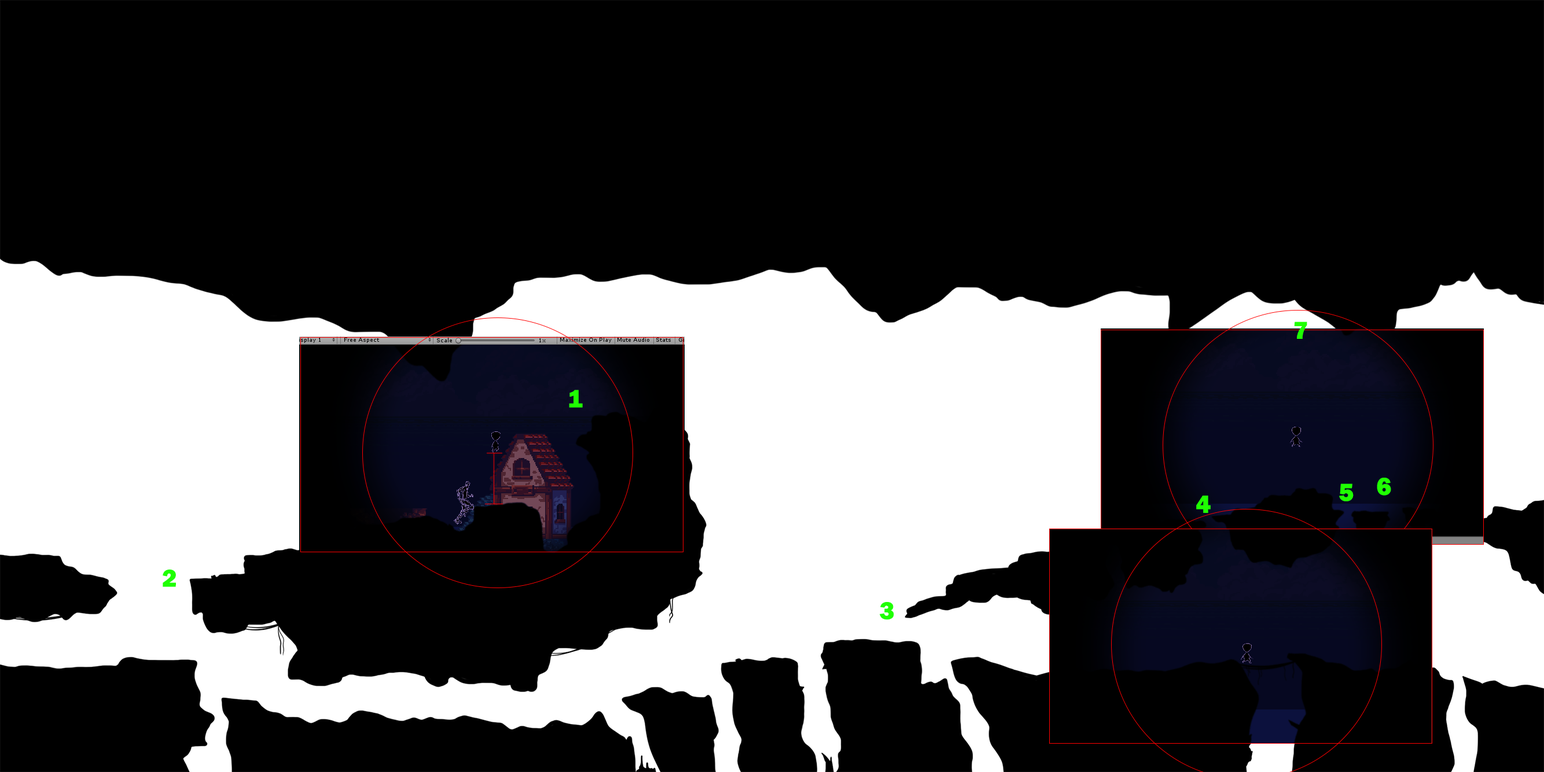
<style>
.page{position:relative;width:1544px;height:772px;background:#000000}
.page>*{position:absolute;margin:0}
.t1{font:25.5px "FranklinGothic-Heavy";letter-spacing:0.025em;color:#1fff01}
</style>
<div class="page">
<p class="t1" style="left:1294px;top:322px;width:13px;height:17px">7</p>
<p class="t1" style="left:569px;top:390px;width:14px;height:18px">1</p>
<p class="t1" style="left:1339px;top:484px;width:14px;height:18px">5</p>
<p class="t1" style="left:1377px;top:478px;width:14px;height:18px">6</p>
<p class="t1" style="left:1196px;top:496px;width:14px;height:17px">4</p>
<p class="t1" style="left:163px;top:569px;width:13px;height:18px">2</p>
<p class="t1" style="left:879px;top:602px;width:15px;height:18px">3</p>
</div>
